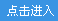
<style>
.page{position:relative;width:58px;height:21px;background:#3994e3}
.page>*{position:absolute;margin:0}
.t1{font:12px "SimSun";color:#ffffff}
</style>
<div class="page">
<p class="t1" style="left:7px;top:5px;width:47px;height:11px">点击进入</p>
</div>
